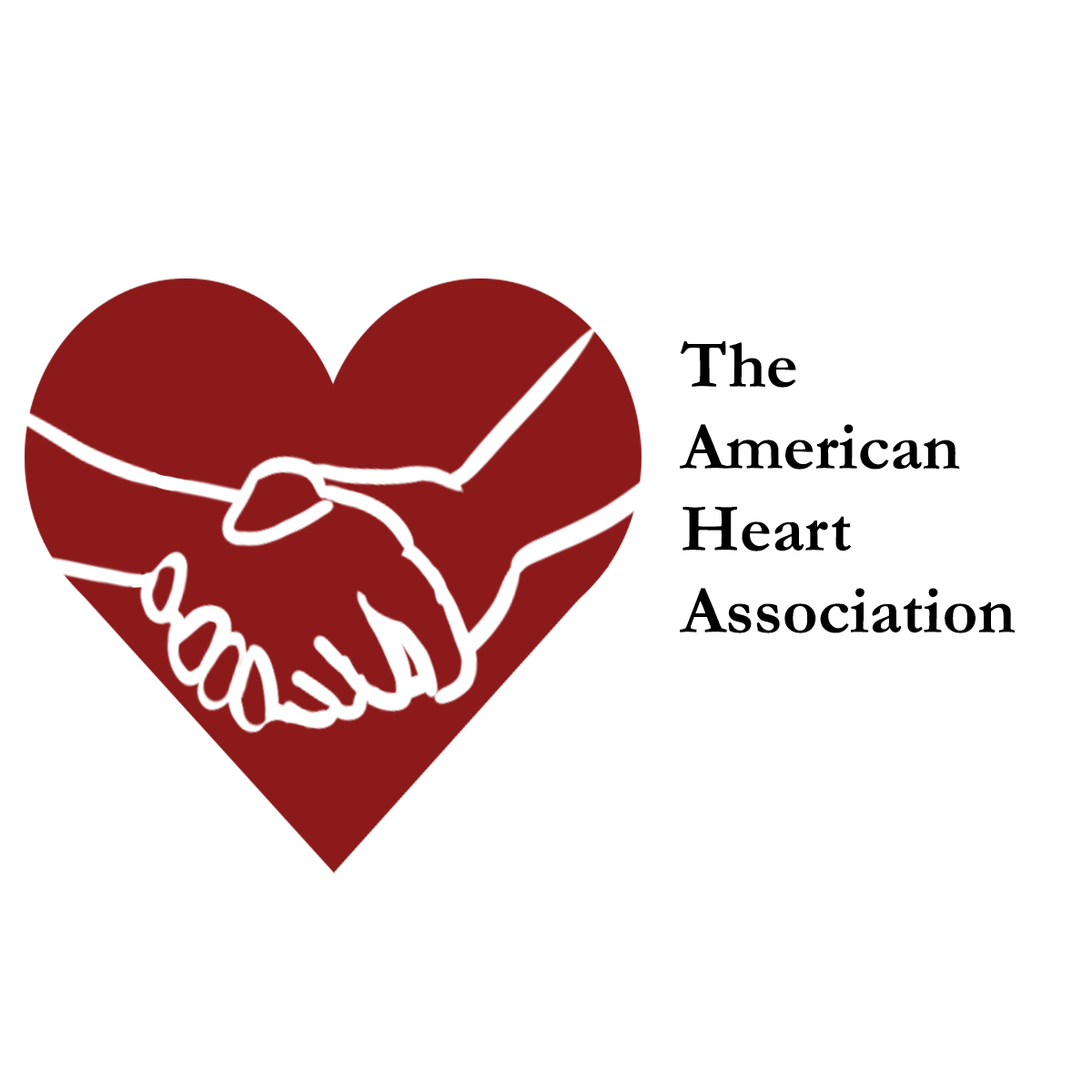
<style>
.page{position:relative;width:1092px;height:1092px;background:#ffffff}
.page>*{position:absolute;margin:0}
.t1{font:68.2px "Garamond-Bold";color:#000000}
</style>
<div class="page">
<p class="t1" style="left:680px;top:341px;width:335px;height:292px">The<br>American<br>Heart<br>Association</p>
</div>
